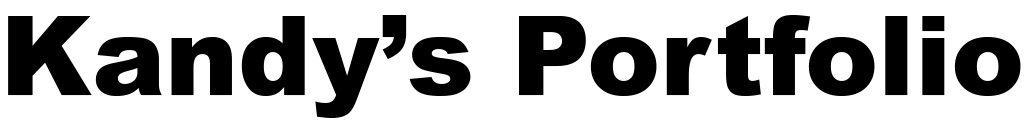
<style>
.page{position:relative;width:1024px;height:136px;background:#ffffff}
.page>*{position:absolute;margin:0}
.t1{font:110px "Arial-Black";color:#000000}
</style>
<div class="page">
<p class="t1" style="left:8px;top:15px;width:1013px;height:103px">Kandy’s Portfolio</p>
</div>
